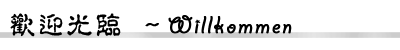
<style>
.page{position:relative;width:400px;height:50px;background:#ffffff}
.page>*{position:absolute;margin:0}
.t1{font:27px "GiddyupStd";letter-spacing:0.06em;color:#000000;font-weight:bold}
.t2{font:27px "¾­µä·±µ­¹Å Regular";letter-spacing:0.06em;color:#000000}
.t3{font:27px "¾­µä·±µ­¹Å Regular";letter-spacing:0.06em;color:#000000;font-weight:bold}
</style>
<div class="page">
<p class="t1" style="left:10px;top:13px;width:282px;height:24px"><span class="t2">欢迎光临 </span><span class="t3">～</span>Willkommen</p>
</div>
